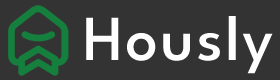
<style>
.page{position:relative;width:280px;height:80px;background:#333333}
.page>*{position:absolute;margin:0}
.t1{font:64px "LeagueSpartan-Medium";letter-spacing:0.04em;color:#fefefe}
</style>
<div class="page">
<p class="t1" style="left:86px;top:16px;width:187px;height:58px">Hously</p>
</div>
